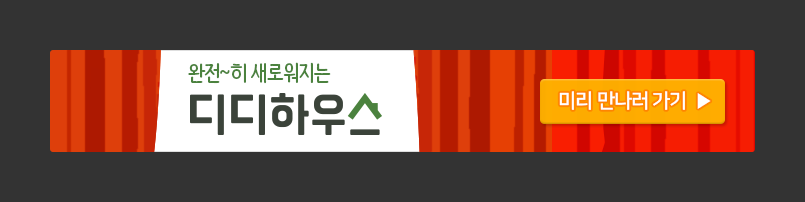
<style>
.page{position:relative;width:805px;height:202px;background:#333333}
.page>*{position:absolute;margin:0}
.t1{font:22px "NanumBarunpen-Bold";letter-spacing:-0.05em;color:#4b823e}
.t2{font:20px "NanumSquareOTFB";letter-spacing:-0.05em;color:#fffffe}
</style>
<div class="page">
<p class="t1" style="left:188px;top:62px;width:143px;height:22px">완전~히 새로워지는</p>
<p class="t2" style="left:559px;top:91px;width:152px;height:19px">미리 만나러 가기  ▶︎</p>
</div>
